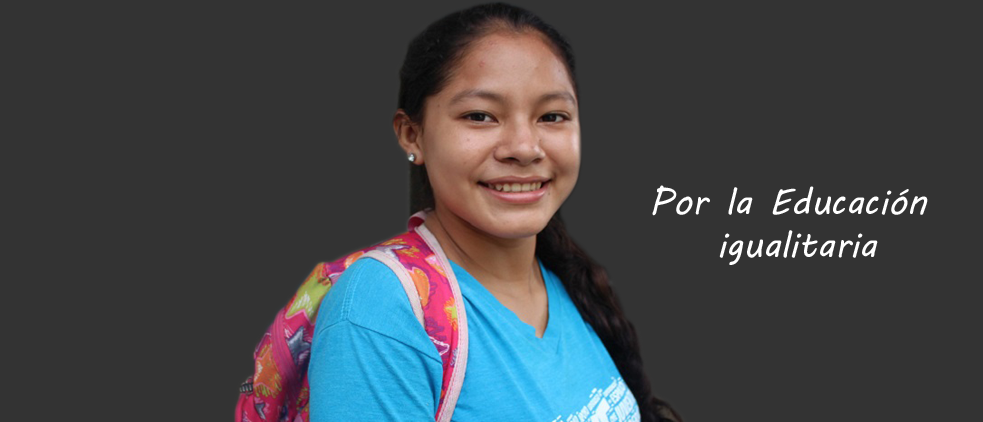
<style>
.page{position:relative;width:983px;height:422px;background:#333333}
.page>*{position:absolute;margin:0}
.t1{font:36px "MVBoli";color:#ffffff}
</style>
<div class="page">
<p class="t1" style="left:652px;top:185px;width:276px;height:80px;text-align:center">Por la Educación<br> igualitaria</p>
</div>
